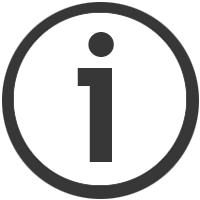
<style>
.page{position:relative;width:200px;height:200px;background:#ffffff}
.page>*{position:absolute;margin:0}
.t1{font:180px "TrebuchetMS-Bold";color:#373737}
</style>
<div class="page">
<p class="t1" style="left:77px;top:32px;width:37px;height:130px">i</p>
</div>
